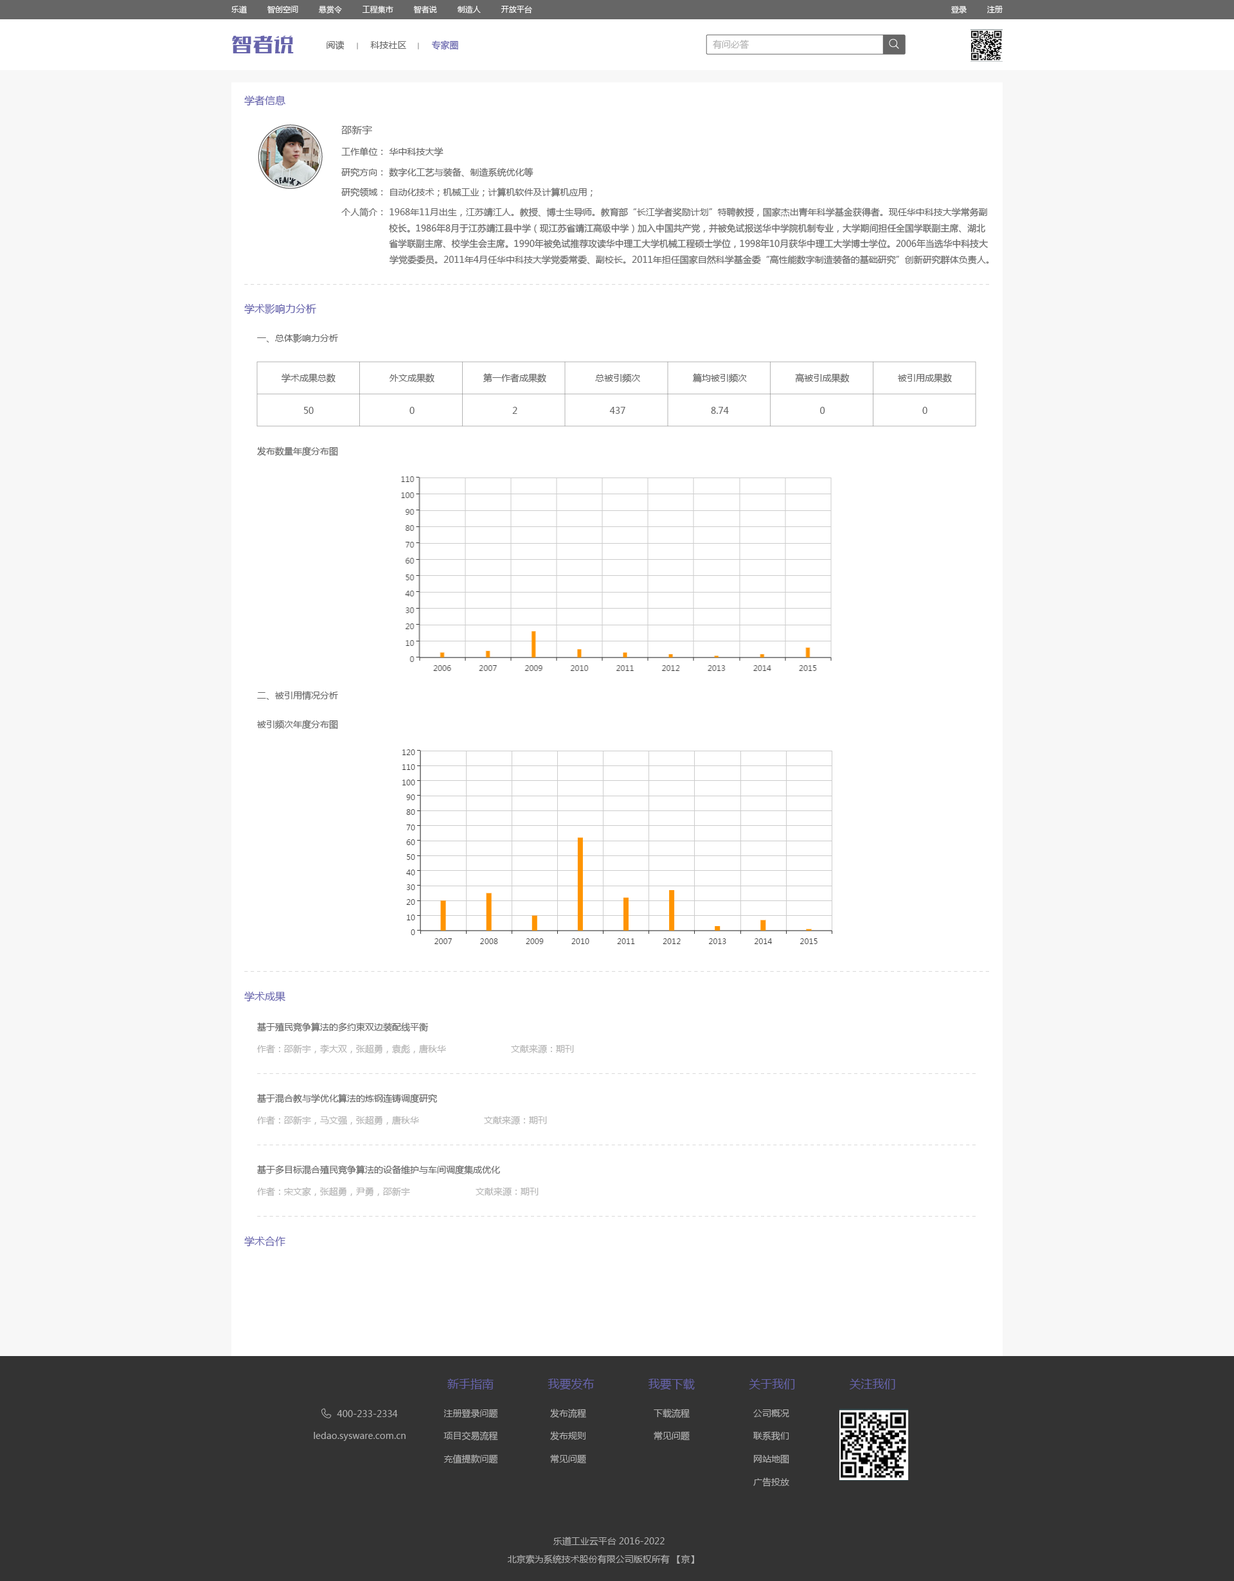
<style>
.page{position:relative;width:1234px;height:1581px;background:#ffffff}
.page>*{position:absolute;margin:0}
.t1{font:7.7px "MicrosoftYaHei";color:#ffffff}
.t2{font:19.3px "FZSKJW--GB1-0";color:#6663ab;scale:1.08 1}
.t3{font:9px "MicrosoftYaHei";color:#666666}
.t4{font:9px "MicrosoftYaHei";color:#6663ab}
.t5{font:9px "MicrosoftYaHei";color:#b2b2b2}
.t6{font:10.3px "MicrosoftYaHei";color:#6663ab}
.t7{font:10.3px "MicrosoftYaHei";color:#666666}
.t8{font:9px "MicrosoftYaHei";color:#b3b3b3}
.t9{font:11.6px "MicrosoftYaHei";color:#6663ab}
</style>
<div class="page">
<p class="t1" style="left:231px;top:5px;width:301px;height:9px">乐道         智创空间         悬赏令         工程集市         智者说         制造人         开放平台</p>
<p class="t1" style="left:951px;top:6px;width:52px;height:8px">登录         注册</p>
<p class="t2" style="left:232px;top:35px;width:62px;height:18px">智者说</p>
<p class="t3" style="left:327px;top:40px;width:18px;height:10px">阅读</p>
<p class="t3" style="left:370px;top:41px;width:36px;height:8px">科技社区</p>
<p class="t4" style="left:431px;top:40px;width:27px;height:10px">专家圈</p>
<p class="t5" style="left:713px;top:40px;width:36px;height:10px">有问必答</p>
<p class="t6" style="left:244px;top:95px;width:41px;height:11px">学者信息</p>
<p class="t7" style="left:341px;top:125px;width:31px;height:9px">邵新宇</p>
<p class="t3" style="left:341px;top:147px;width:103px;height:9px">工作单位： 华中科技大学</p>
<p class="t3" style="left:341px;top:168px;width:193px;height:9px">研究方向： 数字化工艺与装备、制造系统优化等</p>
<p class="t3" style="left:341px;top:188px;width:252px;height:9px">研究领域： 自动化技术；机械工业；计算机软件及计算机应用；</p>
<p class="t3" style="left:341px;top:208px;width:648px;height:57px">个人简介： 1968年11月出生，江苏靖江人。教授、博士生导师。教育部“长江学者奖励计划”特聘教授，国家杰出青年科学基金获得者。现任华中科技大学常务副<br>                  校长。1986年8月于江苏靖江县中学（现江苏省靖江高级中学）加入中国共产党，并被免试报送华中学院机制专业，大学期间担任全国学联副主席、湖北<br>                  省学联副主席、校学生会主席。1990年被免试推荐攻读华中理工大学机械工程硕士学位，1998年10月获华中理工大学博士学位。2006年当选华中科技大<br>                  学党委委员。2011年4月任华中科技大学党委常委、副校长。2011年担任国家自然科学基金委“高性能数字制造装备的基础研究”创新研究群体负责人。</p>
<p class="t6" style="left:244px;top:303px;width:72px;height:11px">学术影响力分析</p>
<p class="t3" style="left:257px;top:334px;width:81px;height:9px">一、总体影响力分析</p>
<p class="t3" style="left:282px;top:374px;width:54px;height:9px">学术成果总数</p>
<p class="t3" style="left:390px;top:374px;width:45px;height:9px">外文成果数</p>
<p class="t3" style="left:483px;top:374px;width:63px;height:9px">第一作者成果数</p>
<p class="t3" style="left:595px;top:374px;width:45px;height:8px">总被引频次</p>
<p class="t3" style="left:693px;top:374px;width:54px;height:8px">篇均被引频次</p>
<p class="t3" style="left:795px;top:374px;width:55px;height:9px">高被引成果数</p>
<p class="t3" style="left:898px;top:374px;width:54px;height:9px">被引用成果数</p>
<p class="t3" style="left:304px;top:407px;width:10px;height:7px">50</p>
<p class="t3" style="left:410px;top:407px;width:5px;height:7px">0</p>
<p class="t3" style="left:512px;top:407px;width:6px;height:7px">2</p>
<p class="t3" style="left:609px;top:407px;width:17px;height:7px">437</p>
<p class="t3" style="left:711px;top:407px;width:18px;height:7px">8.74</p>
<p class="t3" style="left:820px;top:407px;width:5px;height:7px">0</p>
<p class="t3" style="left:923px;top:407px;width:5px;height:7px">0</p>
<p class="t3" style="left:257px;top:447px;width:81px;height:9px">发布数量年度分布图</p>
<p class="t3" style="left:257px;top:691px;width:81px;height:9px">二、被引用情况分析</p>
<p class="t3" style="left:257px;top:720px;width:81px;height:10px">被引频次年度分布图</p>
<p class="t6" style="left:244px;top:991px;width:41px;height:11px">学术成果</p>
<p class="t3" style="left:257px;top:1023px;width:172px;height:9px">基于殖民竞争算法的多约束双边装配线平衡</p>
<p class="t8" style="left:257px;top:1045px;width:189px;height:9px">作者：邵新宇，李大双，张超勇，袁彪，唐秋华</p>
<p class="t8" style="left:511px;top:1045px;width:63px;height:9px">文献来源：期刊</p>
<p class="t3" style="left:257px;top:1094px;width:180px;height:10px">基于混合教与学优化算法的炼钢连铸调度研究</p>
<p class="t8" style="left:257px;top:1116px;width:162px;height:9px">作者：邵新宇，马文强，张超勇，唐秋华</p>
<p class="t8" style="left:484px;top:1116px;width:63px;height:9px">文献来源：期刊</p>
<p class="t3" style="left:257px;top:1166px;width:243px;height:9px">基于多目标混合殖民竞争算法的设备维护与车间调度集成优化</p>
<p class="t8" style="left:257px;top:1187px;width:153px;height:9px">作者：宋文家，张超勇，尹勇，邵新宇</p>
<p class="t8" style="left:476px;top:1187px;width:63px;height:9px">文献来源：期刊</p>
<p class="t6" style="left:244px;top:1236px;width:41px;height:11px">学术合作</p>
<p class="t9" style="left:447px;top:1379px;width:47px;height:11px">新手指南</p>
<p class="t9" style="left:548px;top:1378px;width:47px;height:12px">我要发布</p>
<p class="t9" style="left:648px;top:1379px;width:47px;height:11px">我要下载</p>
<p class="t9" style="left:749px;top:1379px;width:46px;height:11px">关于我们</p>
<p class="t9" style="left:849px;top:1379px;width:47px;height:11px">关注我们</p>
<p class="t5" style="left:444px;top:1409px;width:54px;height:9px">注册登录问题</p>
<p class="t5" style="left:550px;top:1409px;width:36px;height:10px">发布流程</p>
<p class="t5" style="left:654px;top:1409px;width:36px;height:10px">下载流程</p>
<p class="t5" style="left:753px;top:1410px;width:36px;height:8px">公司概况</p>
<p class="t5" style="left:337px;top:1410px;width:61px;height:8px">400-233-2334</p>
<p class="t5" style="left:314px;top:1432px;width:92px;height:9px">ledao.sysware.com.cn</p>
<p class="t5" style="left:444px;top:1432px;width:54px;height:9px">项目交易流程</p>
<p class="t5" style="left:550px;top:1432px;width:36px;height:9px">发布规则</p>
<p class="t5" style="left:654px;top:1432px;width:36px;height:9px">常见问题</p>
<p class="t5" style="left:753px;top:1432px;width:36px;height:9px">联系我们</p>
<p class="t5" style="left:444px;top:1455px;width:54px;height:9px">充值提款问题</p>
<p class="t5" style="left:550px;top:1455px;width:36px;height:9px">常见问题</p>
<p class="t5" style="left:754px;top:1455px;width:35px;height:9px">网站地图</p>
<p class="t5" style="left:753px;top:1478px;width:36px;height:9px">广告投放</p>
<p class="t5" style="left:554px;top:1537px;width:111px;height:9px">乐道工业云平台 2016-2022</p>
<p class="t5" style="left:508px;top:1555px;width:186px;height:10px">北京索为系统技术股份有限公司版权所有 【京】</p>
</div>
